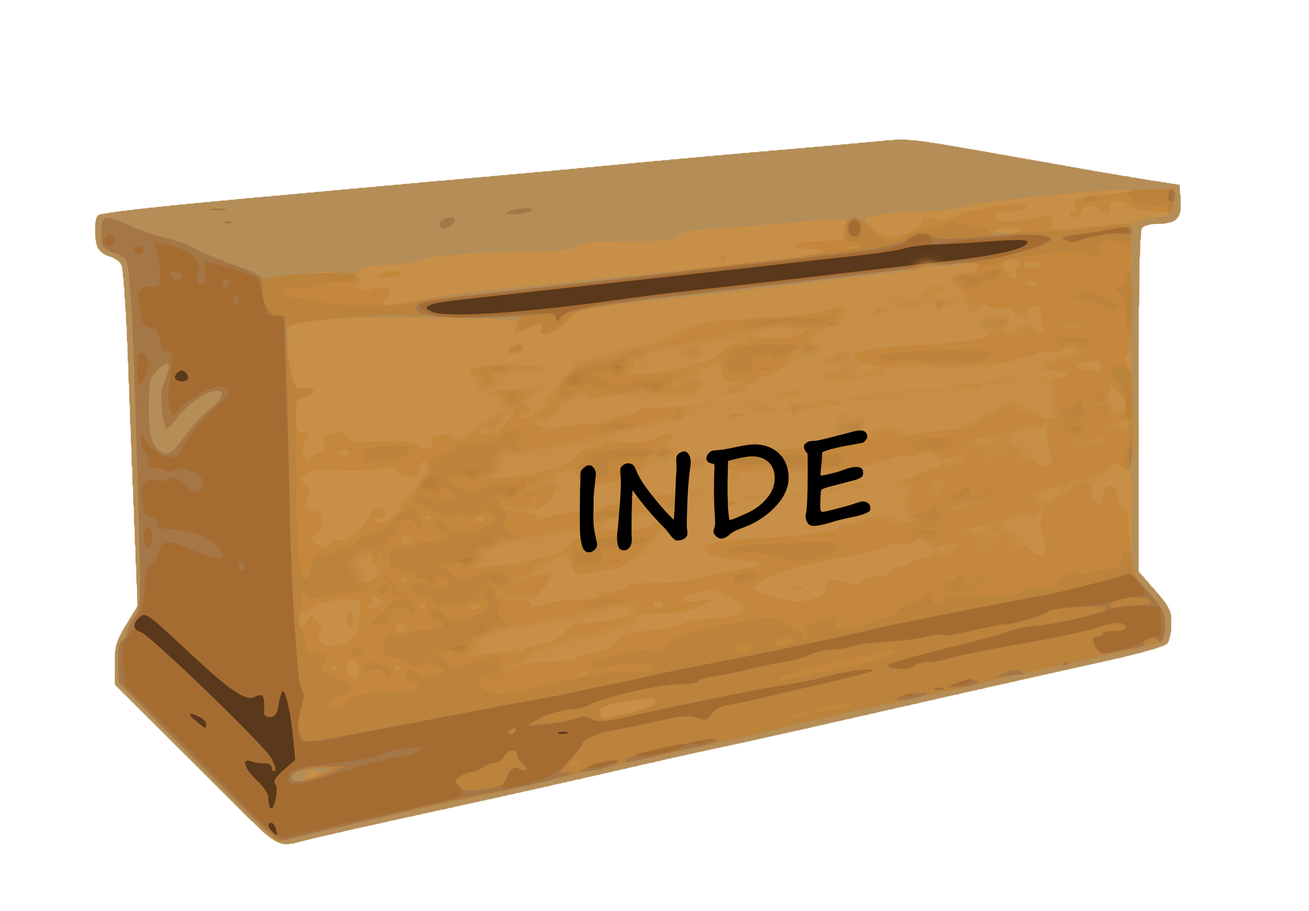
<style>
.page{position:relative;width:1309px;height:911px;background:#ffffff}
.page>*{position:absolute;margin:0}
.t1{font:118.8px "SegoePrint-Bold";color:#000000}
</style>
<div class="page">
<p class="t1" style="left:580px;top:430px;width:291px;height:122px;rotate:-7deg">INDE</p>
</div>
